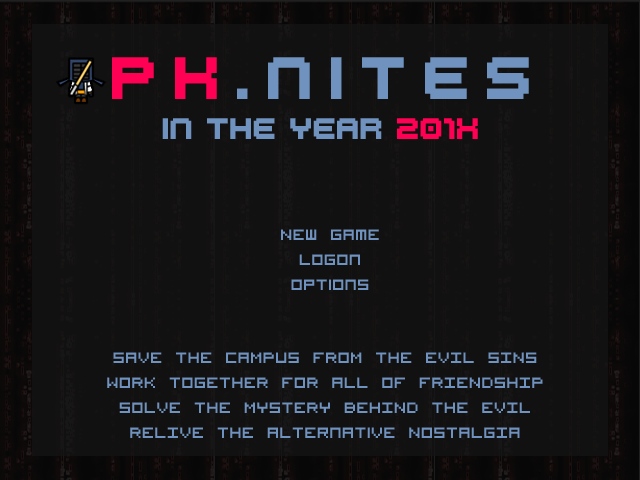
<style>
.page{position:relative;width:640px;height:480px;background:#111111}
.page>*{position:absolute;margin:0}
.t1{font:41.7px "M41_LOVEBIT";color:#7092be}
.t2{font:41.7px "M41_LOVEBIT";color:#ff0055}
.t3{font:20.8px "M41_LOVEBIT";color:#7092be}
.t4{font:20.8px "M41_LOVEBIT";color:#ff0055}
.t5{font:20.8px "VisitorTT1BRK";color:#7092be}
</style>
<div class="page">
<p class="t1" style="left:112px;top:57px;width:417px;height:42px"><span class="t2">P K </span>. N I T E S</p>
<p class="t3" style="left:162px;top:118px;width:316px;height:21px">In The Year <span class="t4">201X</span></p>
<p class="t5" style="left:281px;top:229px;width:98px;height:61px;text-align:center">New Game<br>Logon<br>Options</p>
<p class="t5" style="left:107px;top:352px;width:436px;height:86px;text-align:center">SAVE THE CAMPUS FROM THE EVIL SINS<br>WORK TOGETHER FOR ALL OF FRIENDSHIP<br>SOLVE THE MYSTERY BEHIND THE EVIL<br>RELIVE the Alternative NOSTALGIA</p>
</div>
